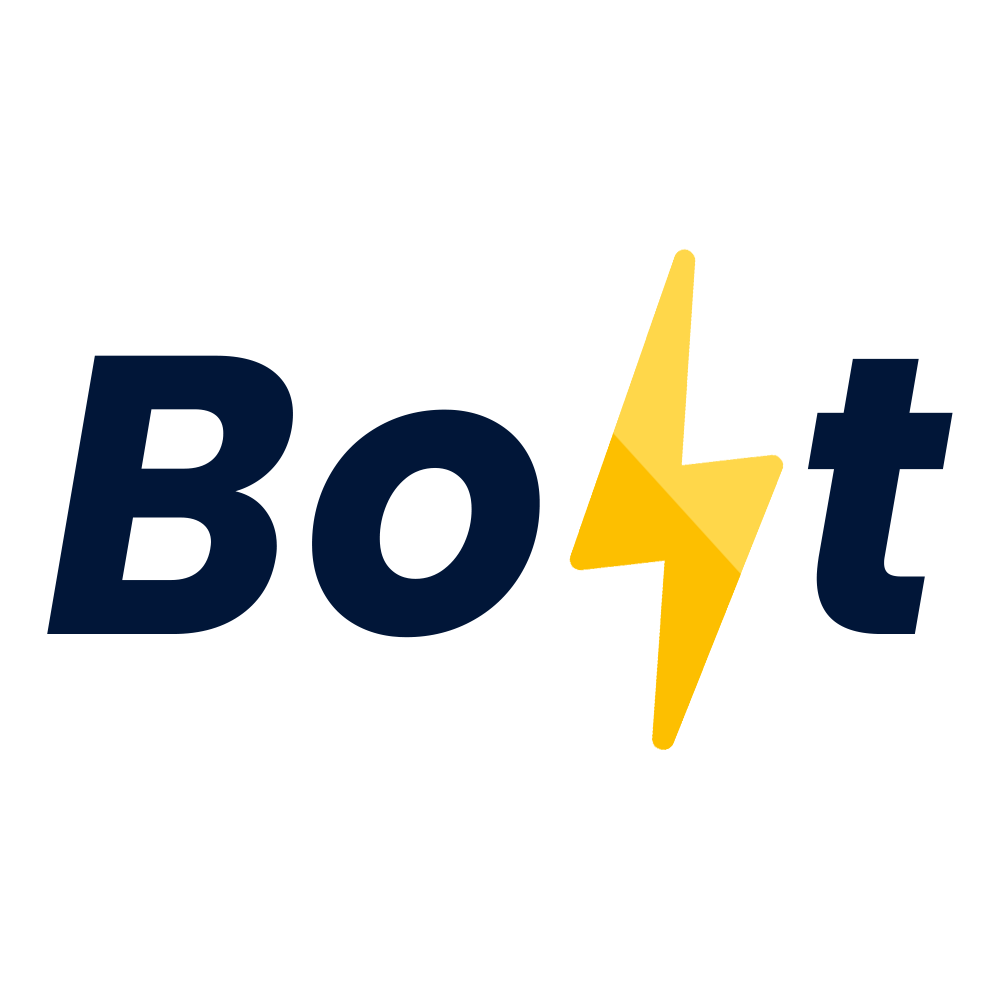
<style>
.page{position:relative;width:1000px;height:1000px;background:#ffffff}
.page>*{position:absolute;margin:0}
.t1{font:396.4px "Poppins-BoldItalic";letter-spacing:0.14em;color:#011638}
</style>
<div class="page">
<p class="t1" style="left:47px;top:355px;width:906px;height:283px">Bo t</p>
</div>
